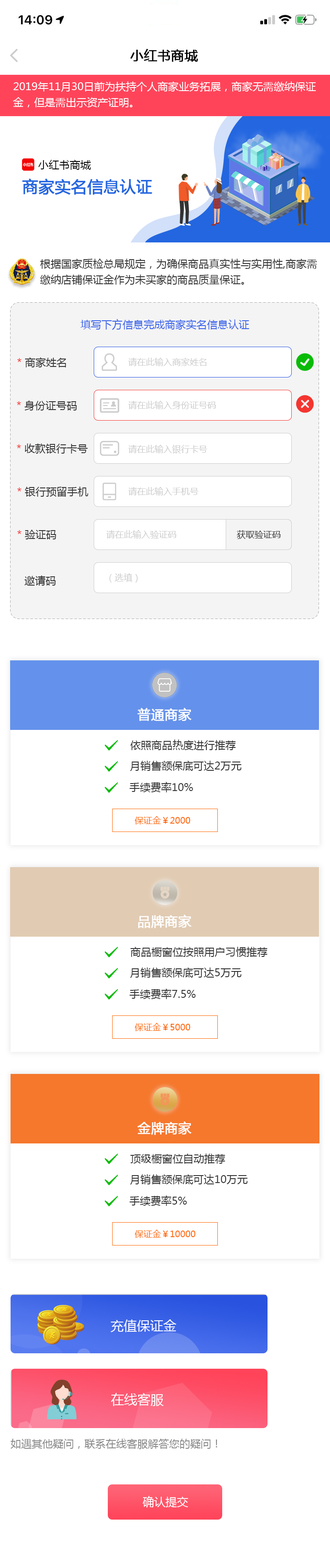
<style>
.page{position:relative;width:330px;height:1568px;background:#ffffff}
.page>*{position:absolute;margin:0}
.t1{font:13.2px "MicrosoftYaHei";color:#000000;font-weight:bold}
.t2{font:10.6px/15.8px "MicrosoftYaHei";color:#ffffff}
.t3{font:10.6px/15.8px "MicrosoftYaHei";color:#333333}
.t4{font:10.6px "MicrosoftYaHei";color:#3962ea}
.t5{font:10.6px "MicrosoftYaHei";color:#333333}
.t6{font:10.6px "MicrosoftYaHei";color:#f43530}
.t7{font:8.8px "MicrosoftYaHei";color:#cccccc}
.t8{font:8.8px "MicrosoftYaHei";color:#333333}
.t9{font:13.2px "MicrosoftYaHei";color:#ffffff;font-weight:bold}
.t10{font:8.8px "MicrosoftYaHei";color:#ff6600}
.t11{font:13.2px "MicrosoftYaHei";color:#ffffff}
.t12{font:10.6px "MicrosoftYaHei";color:#888888}
.t13{font:11.4px "MicrosoftYaHei";color:#ffffff}
</style>
<div class="page">
<p class="t1" style="left:130px;top:49px;width:68px;height:13px">小红书商城</p>
<p class="t2" style="left:13px;top:81px;width:303px;height:26px">2019年11月30日前为扶持个人商家业务拓展，商家无需缴纳保证金，但是需出示资产证明。</p>
<p class="t3" style="left:40px;top:259px;width:277px;height:26px">根据国家质检总局规定，为确保商品真实性与实用性,商家需缴纳店铺保证金作为未买家的商品质量保证。</p>
<p class="t4" style="left:80px;top:319px;width:169px;height:11px">填写下方信息完成商家实名信息认证</p>
<p class="t5" style="left:17px;top:357px;width:49px;height:10px"><span class="t6">* </span>商家姓名</p>
<p class="t7" style="left:128px;top:358px;width:79px;height:8px">请在此输入商家姓名</p>
<p class="t5" style="left:17px;top:400px;width:60px;height:10px"><span class="t6">* </span>身份证号码</p>
<p class="t7" style="left:128px;top:401px;width:88px;height:8px">请在此输入身份证号码</p>
<p class="t5" style="left:17px;top:443px;width:71px;height:11px"><span class="t6">* </span>收款银行卡号</p>
<p class="t7" style="left:128px;top:445px;width:79px;height:9px">请在此输入银行卡号</p>
<p class="t5" style="left:17px;top:487px;width:71px;height:10px"><span class="t6">* </span>银行预留手机</p>
<p class="t7" style="left:128px;top:487px;width:70px;height:8px">请在此输入手机号</p>
<p class="t5" style="left:17px;top:530px;width:39px;height:9px"><span class="t6">* </span>验证码</p>
<p class="t7" style="left:106px;top:530px;width:70px;height:9px">请在此输入验证码</p>
<p class="t8" style="left:237px;top:530px;width:44px;height:9px">获取验证码</p>
<p class="t5" style="left:25px;top:575px;width:31px;height:11px">邀请码</p>
<p class="t7" style="left:109px;top:573px;width:29px;height:10px">（选填）</p>
<p class="t9" style="left:137px;top:708px;width:54px;height:13px">普通商家</p>
<p class="t5" style="left:130px;top:740px;width:106px;height:10px">依照商品热度进行推荐</p>
<p class="t5" style="left:130px;top:761px;width:112px;height:10px">月销售额保底可达2万元</p>
<p class="t5" style="left:129px;top:782px;width:64px;height:10px">手续费率10%</p>
<p class="t10" style="left:135px;top:816px;width:56px;height:8px">保证金￥2000</p>
<p class="t9" style="left:138px;top:915px;width:53px;height:13px">品牌商家</p>
<p class="t5" style="left:130px;top:947px;width:137px;height:10px">商品橱窗位按照用户习惯推荐</p>
<p class="t5" style="left:130px;top:967px;width:112px;height:11px">月销售额保底可达5万元</p>
<p class="t5" style="left:129px;top:989px;width:67px;height:10px">手续费率7.5%</p>
<p class="t10" style="left:135px;top:1023px;width:56px;height:8px">保证金￥5000</p>
<p class="t9" style="left:137px;top:1121px;width:54px;height:14px">金牌商家</p>
<p class="t5" style="left:130px;top:1154px;width:95px;height:10px">顶级橱窗位自动推荐</p>
<p class="t5" style="left:130px;top:1174px;width:118px;height:11px">月销售额保底可达10万元</p>
<p class="t5" style="left:129px;top:1195px;width:58px;height:11px">手续费率5%</p>
<p class="t10" style="left:135px;top:1230px;width:60px;height:8px">保证金￥10000</p>
<p class="t11" style="left:110px;top:1319px;width:66px;height:13px">充值保证金</p>
<p class="t11" style="left:111px;top:1393px;width:53px;height:13px">在线客服</p>
<p class="t12" style="left:11px;top:1439px;width:206px;height:10px">如遇其他疑问，联系在线客服解答您的疑问！</p>
<p class="t13" style="left:143px;top:1496px;width:45px;height:12px">确认提交</p>
</div>
